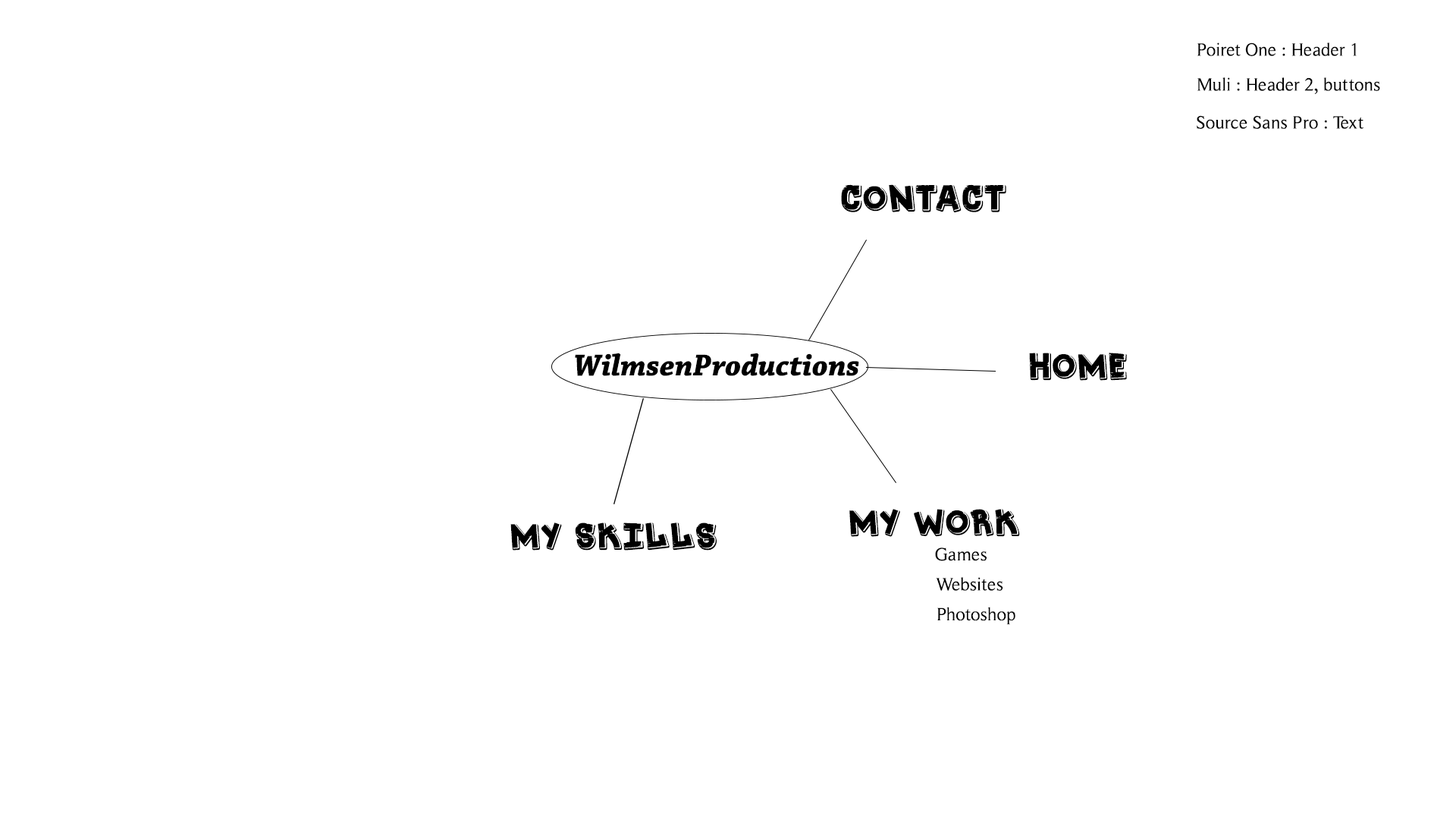
<style>
.page{position:relative;width:1456px;height:819px;background:#ffffff}
.page>*{position:absolute;margin:0}
.t1{font:18.2px "RomanSerif";color:#000000}
.t2{font:36.4px "Shoescenter";color:#000000}
.t3{font:31.6px "ChaparralPro-BoldIt";color:#000000}
</style>
<div class="page">
<p class="t1" style="left:1197px;top:42px;width:160px;height:14px">Poiret One : Header 1</p>
<p class="t1" style="left:1197px;top:77px;width:183px;height:17px">Muli : Header 2, buttons</p>
<p class="t1" style="left:1197px;top:115px;width:166px;height:14px">Source Sans Pro : Text</p>
<p class="t2" style="left:841px;top:184px;width:165px;height:28px">Contact</p>
<p class="t3" style="left:575px;top:353px;width:284px;height:23px">WilmsenProductions</p>
<p class="t2" style="left:1029px;top:353px;width:98px;height:28px">Home</p>
<p class="t2" style="left:849px;top:509px;width:171px;height:28px">My Work</p>
<p class="t2" style="left:510px;top:522px;width:207px;height:29px">My Skills</p>
<p class="t1" style="left:935px;top:548px;width:52px;height:13px">Games</p>
<p class="t1" style="left:936px;top:577px;width:67px;height:14px">Websites</p>
<p class="t1" style="left:937px;top:607px;width:78px;height:18px">Photoshop</p>
</div>
